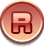
<style>
.page{position:relative;width:44px;height:48px}
.page>*{position:absolute;margin:0}
.t1{font:29.3px "DFSoGeiStd-W9";letter-spacing:0.05em;scale:0.9 1}
</style>
<div class="page">
<p class="t1" style="left:13px;top:13px;width:18px;height:19px">R</p>
</div>
